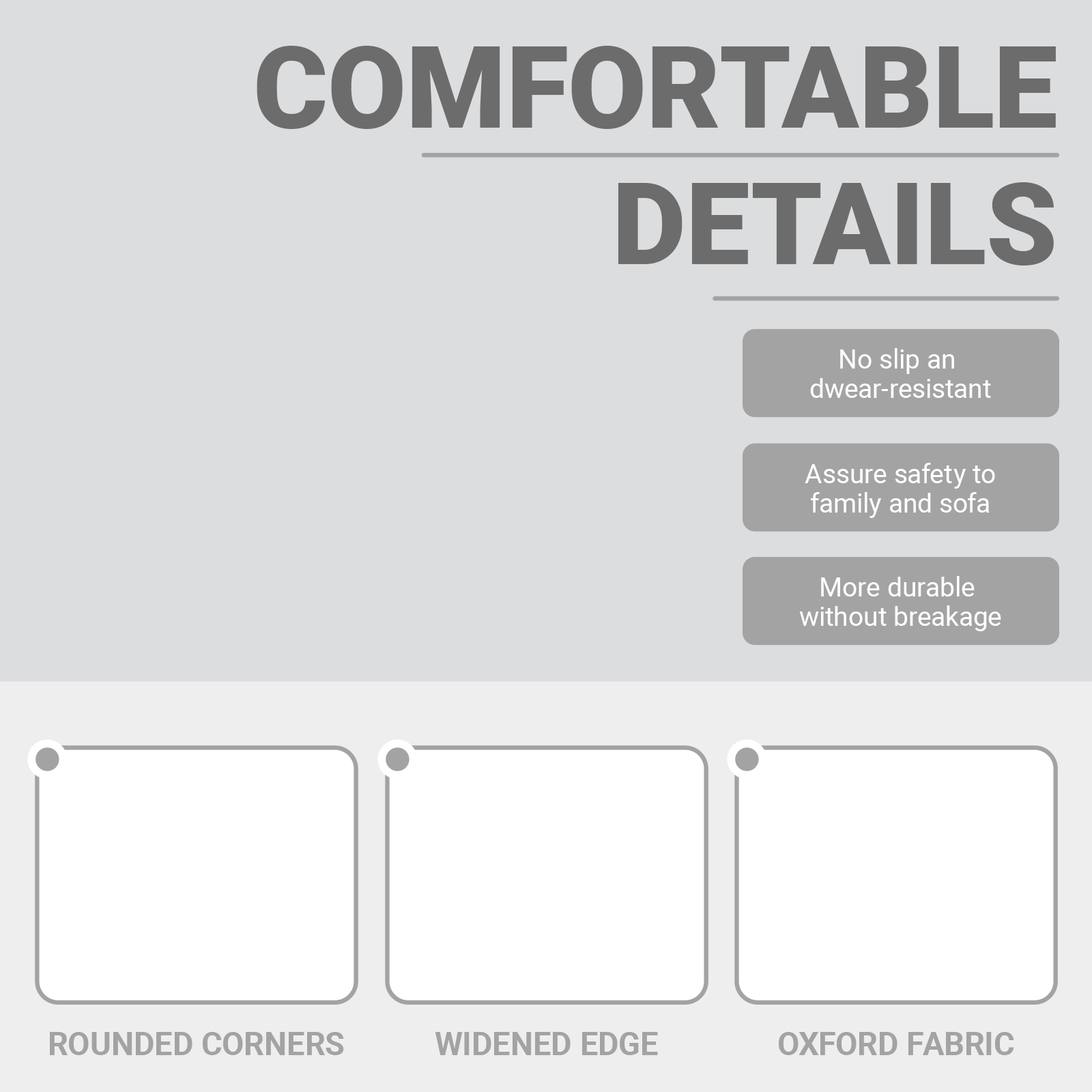
<style>
.page{position:relative;width:1092px;height:1092px;background:#dcdddf}
.page>*{position:absolute;margin:0}
.t1{font:113.8px "Roboto-Black";color:#6c6c6c}
.t2{font:26.9px/29.1px "Roboto-Regular";color:#ffffff}
.t3{font:32px "Roboto-Bold";color:#a3a3a3}
</style>
<div class="page">
<p class="t1" style="left:257px;top:46px;width:799px;height:219px;text-align:right">COMFORTABLE<br>DETAILS</p>
<p class="t2" style="left:810px;top:348px;width:181px;height:50px;text-align:center">No slip an <br>dwear-resistant</p>
<p class="t2" style="left:805px;top:463px;width:190px;height:55px;text-align:center">Assure safety to<br>family and sofa</p>
<p class="t2" style="left:799px;top:576px;width:202px;height:55px;text-align:center">More durable <br>without breakage</p>
<p class="t3" style="left:50px;top:1032px;width:294px;height:23px">ROUNDED CORNERS</p>
<p class="t3" style="left:435px;top:1032px;width:223px;height:23px">WIDENED EDGE</p>
<p class="t3" style="left:779px;top:1032px;width:235px;height:23px">OXFORD FABRIC</p>
</div>
